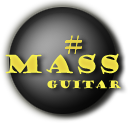
<style>
.page{position:relative;width:128px;height:128px;background:#ffffff}
.page>*{position:absolute;margin:0}
.t1{font:24px "GoudyStout";color:#e7d245}
.t2{font:10px "GoudyStout";color:#f7f151}
</style>
<div class="page">
<p class="t1" style="left:65px;top:35px;width:17px;height:19px">#</p>
<p class="t1" style="left:65px;top:35px;width:17px;height:19px">#</p>
<p class="t1" style="left:65px;top:35px;width:17px;height:19px">#</p>
<p class="t1" style="left:5px;top:53px;width:114px;height:21px">mass</p>
<p class="t2" style="left:47px;top:80px;width:74px;height:9px">Guitar</p>
</div>
